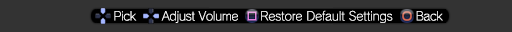
<style>
.page{position:relative;width:512px;height:32px;background:#333333}
.page>*{position:absolute;margin:0}
.t1{font:12px "RodinNTLGPro-L";letter-spacing:-0.025em;color:#ffffff}
.t2{font:12px "RodinNTLGPro-L";letter-spacing:-0.01em;color:#ffffff}
</style>
<div class="page">
<p class="t1" style="left:114px;top:10px;width:329px;height:13px">Pick       Adjust Volume      <span class="t2">Restore Default Settings     </span>Back</p>
</div>
